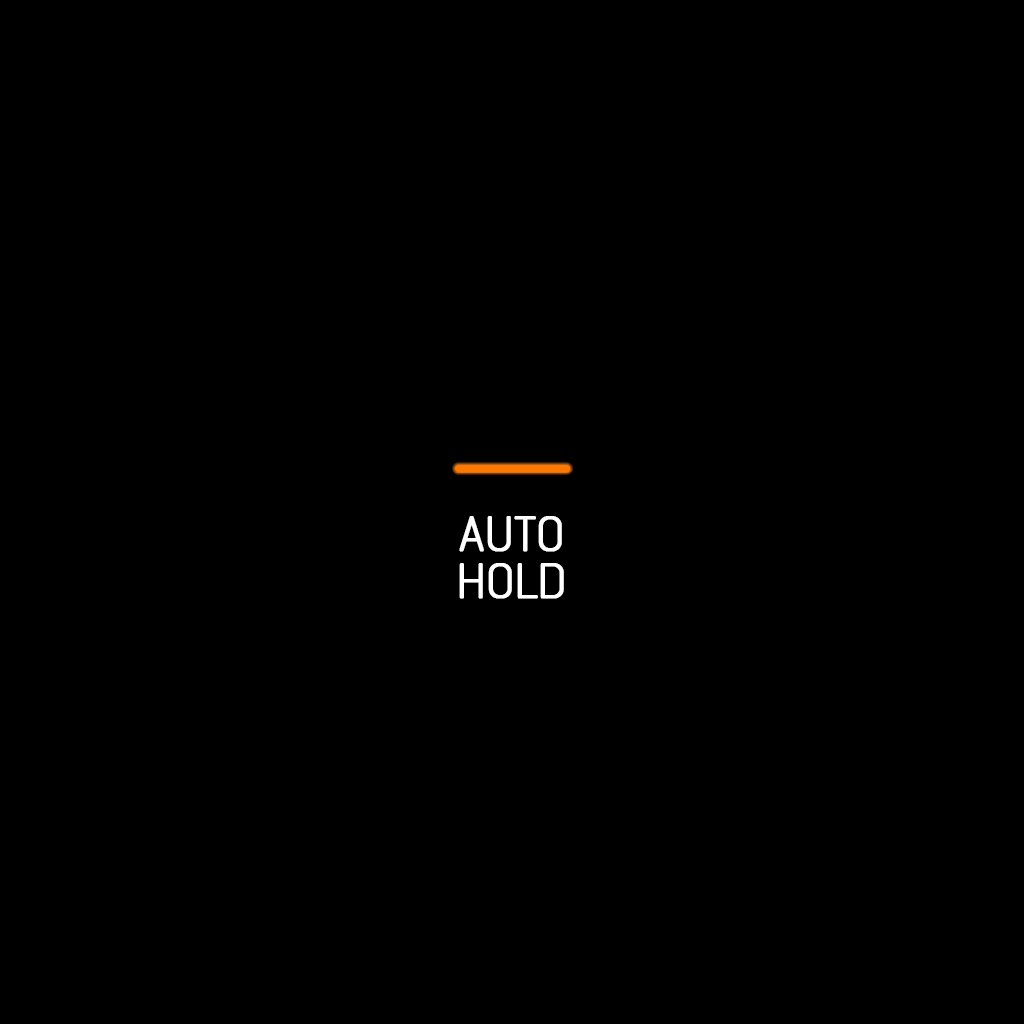
<style>
.page{position:relative;width:1024px;height:1024px;background:#000000}
.page>*{position:absolute;margin:0}
.t1{font:47.2px/47.2px "NeutraliserSans-Regular";color:#ffffff;font-weight:bold}
</style>
<div class="page">
<p class="t1" style="left:459px;top:516px;width:105px;height:83px;text-align:center">AUTO<br>HOLD</p>
</div>
